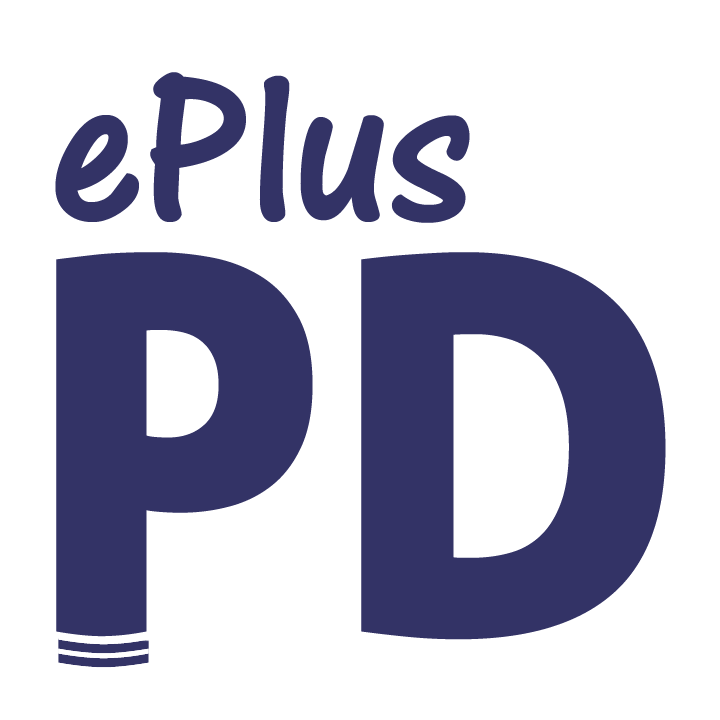
<style>
.page{position:relative;width:720px;height:720px;background:#ffffff}
.page>*{position:absolute;margin:0}
.t1{font:225px "ARCENA";color:#333366}
.t2{font:520.8px "AllerDisplay";color:#333366}
</style>
<div class="page">
<p class="t1" style="left:55px;top:72px;width:415px;height:151px">ePlus</p>
<p class="t2" style="left:56px;top:252px;width:610px;height:388px">PD</p>
</div>
